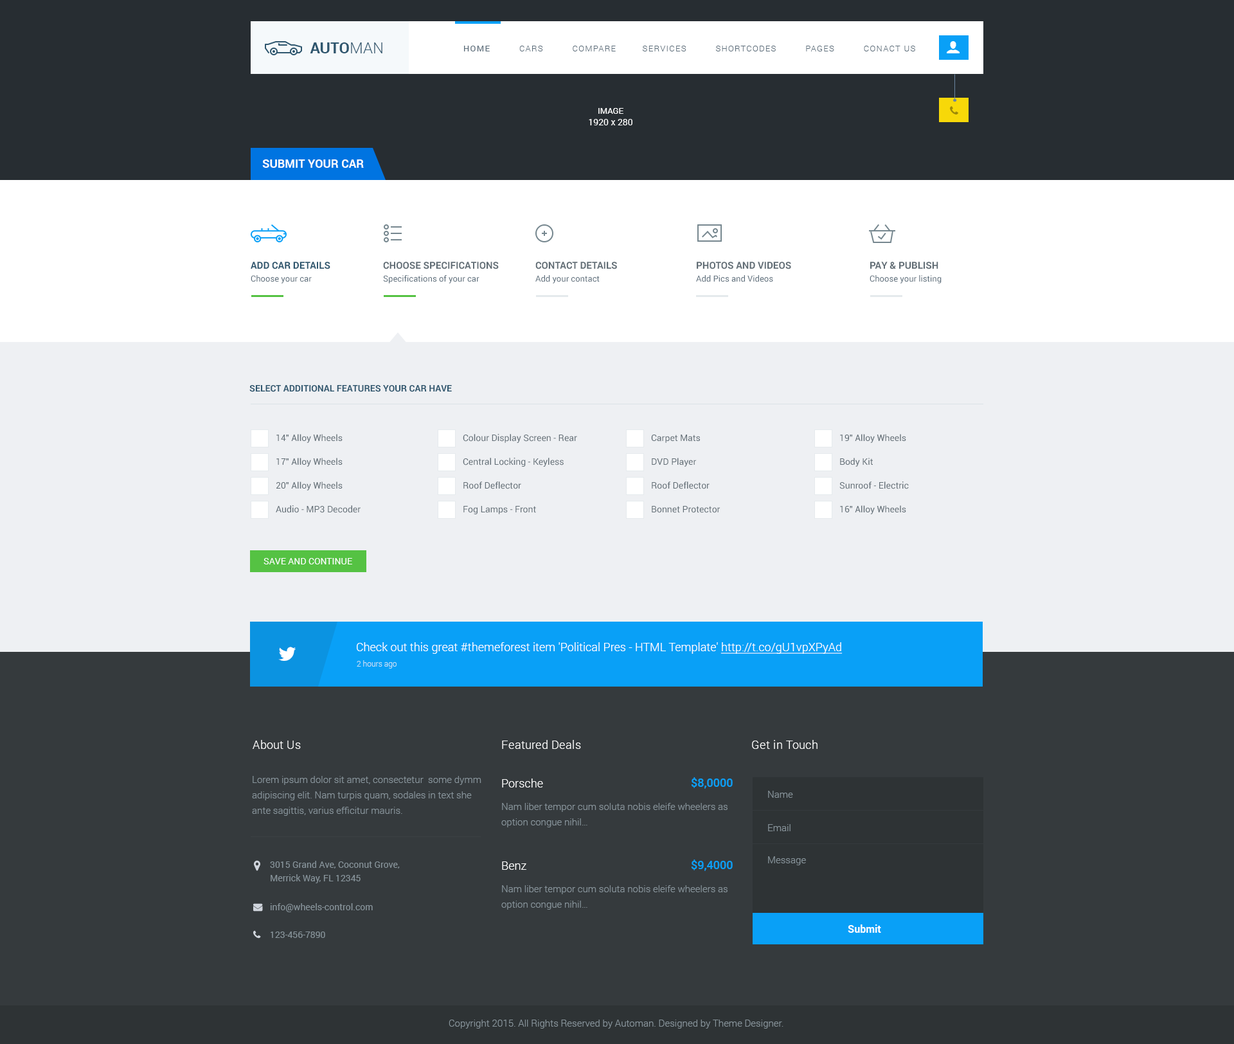
<style>
.page{position:relative;width:1234px;height:1044px;background:#353a3d}
.page>*{position:absolute;margin:0}
.t1{font:15.4px "Roboto-Bold";color:#2e566e;text-transform:uppercase}
.t2{font:15.4px "Roboto-Light";color:#2e566e;text-transform:uppercase}
.t3{font:8.4px "Roboto-Light";letter-spacing:0.1em;color:#5d6e7b;text-transform:uppercase}
.t4{font:8.4px "Roboto-Regular";letter-spacing:0.1em;color:#5d6e7b;text-transform:uppercase}
.t5{font:9px/11.6px "Roboto-Regular";color:#ffffff}
.t6{font:8.4px/11.6px "Roboto-Regular";color:#ffffff}
.t7{font:11.6px "Roboto-Bold";color:#ffffff;text-transform:uppercase}
.t8{font:9.6px/12.9px "Roboto-Bold";color:#2e566e;text-transform:uppercase}
.t9{font:8.4px/12.9px "Roboto-Regular";color:#5d6e7b}
.t10{font:9.6px/12.9px "Roboto-Bold";color:#616d75;text-transform:uppercase}
.t11{font:9px "Roboto-Bold";color:#2e566e;text-transform:uppercase}
.t12{font:9px "Roboto-Regular";color:#616d75}
.t13{font:9px "Roboto-Regular";color:#ffffff;text-transform:uppercase}
.t14{font:11.6px "Roboto-Light";color:#ffffff}
.t15{font:11.6px "Roboto-Light";color:#ffffff;text-decoration:underline}
.t16{font:7.7px "Roboto-Light";color:#c3e1f4}
.t17{font:11.6px "Roboto-Light";letter-spacing:0.025em;color:#ffffff}
.t18{font:9.6px/15.4px "Roboto-Light";color:#88949b}
.t19{font:11.6px "Roboto-Medium";color:#09a0f7}
.t20{font:9.6px "Roboto-Light";color:#88949b}
.t21{font:9px/13.5px "Roboto-Regular";color:#88949b}
.t22{font:9px "Roboto-Regular";color:#88949b}
.t23{font:10.3px "Roboto-Bold";color:#ffffff}
</style>
<div class="page">
<p class="t1" style="left:310px;top:42px;width:72px;height:11px">Auto<span class="t2">man</span></p>
<p class="t3" style="left:464px;top:46px;width:451px;height:5px"><span class="t4">Home</span>          Cars          COMPARE         Services          Shortcodes          Pages          Conact us</p>
<p class="t5" style="left:589px;top:108px;width:44px;height:17px;text-align:center"><span class="t6">IMAGE<br></span>1920 x 280</p>
<p class="t7" style="left:262px;top:159px;width:102px;height:9px">Submit your car</p>
<p class="t8" style="left:251px;top:262px;width:79px;height:22px">ADD CAR DETAILS<br><span class="t9">Choose your car</span></p>
<p class="t9" style="left:383px;top:262px;width:116px;height:22px"><span class="t10">CHOOSE SPECIFICATIONS<br></span>Specifications of your car</p>
<p class="t9" style="left:536px;top:262px;width:81px;height:22px"><span class="t10">CONTACT DETAILS<br></span>Add your contact</p>
<p class="t9" style="left:696px;top:262px;width:95px;height:20px"><span class="t10">PHOTOS AND VIDEOS<br></span>Add Pics and Videos</p>
<p class="t9" style="left:870px;top:262px;width:72px;height:22px"><span class="t10">PAY &amp; PUBLISH<br></span>Choose your listing</p>
<p class="t11" style="left:249px;top:385px;width:203px;height:7px">Select additional features your car have</p>
<p class="t12" style="left:276px;top:434px;width:67px;height:9px">14" Alloy Wheels</p>
<p class="t12" style="left:463px;top:434px;width:114px;height:9px">Colour Display Screen - Rear</p>
<p class="t12" style="left:651px;top:435px;width:49px;height:8px">Carpet Mats</p>
<p class="t12" style="left:840px;top:434px;width:66px;height:9px">19" Alloy Wheels</p>
<p class="t12" style="left:276px;top:458px;width:67px;height:9px">17" Alloy Wheels</p>
<p class="t12" style="left:463px;top:458px;width:101px;height:9px">Central Locking - Keyless</p>
<p class="t12" style="left:652px;top:458px;width:45px;height:9px">DVD Player</p>
<p class="t12" style="left:840px;top:458px;width:33px;height:9px">Body Kit</p>
<p class="t12" style="left:276px;top:482px;width:67px;height:9px">20" Alloy Wheels</p>
<p class="t12" style="left:464px;top:482px;width:57px;height:7px">Roof Deflector</p>
<p class="t12" style="left:652px;top:482px;width:58px;height:7px">Roof Deflector</p>
<p class="t12" style="left:840px;top:482px;width:69px;height:7px">Sunroof - Electric</p>
<p class="t12" style="left:276px;top:505px;width:85px;height:8px">Audio - MP3 Decoder</p>
<p class="t12" style="left:464px;top:506px;width:72px;height:8px">Fog Lamps - Front</p>
<p class="t12" style="left:652px;top:506px;width:69px;height:7px">Bonnet Protector</p>
<p class="t12" style="left:840px;top:505px;width:66px;height:9px">16" Alloy Wheels</p>
<p class="t13" style="left:264px;top:558px;width:88px;height:6px">Save and Continue</p>
<p class="t14" style="left:357px;top:642px;width:486px;height:12px">Check out this great #themeforest item 'Political Pres - HTML Template' <span class="t15">http://t.co/gU1vpXPyAd</span></p>
<p class="t16" style="left:357px;top:660px;width:40px;height:9px">2 hours ago</p>
<p class="t17" style="left:253px;top:740px;width:48px;height:9px">About Us</p>
<p class="t17" style="left:502px;top:740px;width:79px;height:9px">Featured Deals</p>
<p class="t17" style="left:752px;top:740px;width:66px;height:9px">Get in Touch</p>
<p class="t18" style="left:252px;top:776px;width:230px;height:40px">Lorem ipsum dolor sit amet, consectetur  some dymm<br>adipiscing elit. Nam turpis quam, sodales in text she<br>ante sagittis, varius efficitur mauris.</p>
<p class="t14" style="left:502px;top:779px;width:41px;height:9px">Porsche</p>
<p class="t19" style="left:691px;top:777px;width:42px;height:12px">$8,0000</p>
<p class="t20" style="left:768px;top:791px;width:25px;height:7px">Name</p>
<p class="t18" style="left:501px;top:803px;width:227px;height:24px">Nam liber tempor cum soluta nobis eleife wheelers as<br>option congue nihil…</p>
<p class="t20" style="left:768px;top:824px;width:23px;height:7px">Email</p>
<p class="t20" style="left:768px;top:856px;width:38px;height:9px">Message</p>
<p class="t21" style="left:270px;top:861px;width:130px;height:22px">3015 Grand Ave, Coconut Grove,<br>Merrick Way, FL 12345</p>
<p class="t14" style="left:502px;top:861px;width:24px;height:9px">Benz</p>
<p class="t19" style="left:691px;top:860px;width:42px;height:11px">$9,4000</p>
<p class="t18" style="left:501px;top:885px;width:227px;height:25px">Nam liber tempor cum soluta nobis eleife wheelers as<br>option congue nihil…</p>
<p class="t22" style="left:271px;top:903px;width:102px;height:9px">info@wheels-control.com</p>
<p class="t23" style="left:848px;top:924px;width:33px;height:9px">Submit</p>
<p class="t22" style="left:271px;top:932px;width:54px;height:6px">123-456-7890</p>
<p class="t20" style="left:449px;top:1020px;width:335px;height:9px">Copyright 2015. All Rights Reserved by Automan. Designed by Theme Designer.</p>
</div>
